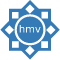
<style>
.page{position:relative;width:60px;height:60px;background:#ffffff}
.page>*{position:absolute;margin:0}
.t1{font:10px "Audiowide-Regular";color:#ffffff}
</style>
<div class="page">
<p class="t1" style="left:19px;top:24px;width:22px;height:9px">hmv</p>
</div>
